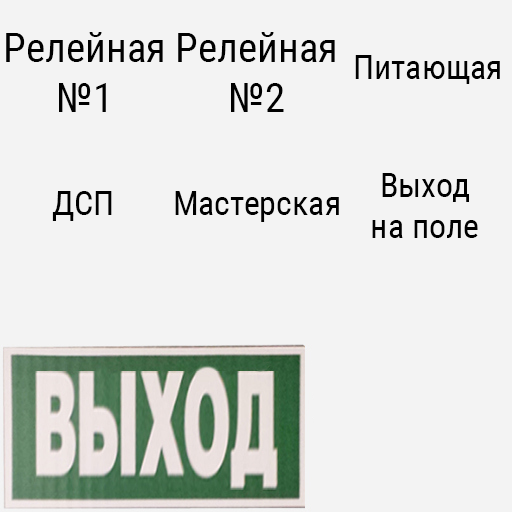
<style>
.page{position:relative;width:512px;height:512px;background:#f3f3f3}
.page>*{position:absolute;margin:0}
.t1{font:41px "RobotoCondensed-Regular";color:#000000}
.t2{font:34px "RobotoCondensed-Regular";color:#000000}
</style>
<div class="page">
<p class="t1" style="left:6px;top:32px;width:157px;height:80px;text-align:center">Релейная №1</p>
<p class="t1" style="left:178px;top:32px;width:157px;height:80px;text-align:center">Релейная №2</p>
<p class="t2" style="left:355px;top:55px;width:145px;height:29px">Питающая</p>
<p class="t2" style="left:372px;top:173px;width:106px;height:65px;text-align:center">Выход<br>на поле</p>
<p class="t2" style="left:52px;top:191px;width:60px;height:30px">ДСП</p>
<p class="t2" style="left:175px;top:191px;width:164px;height:31px">Мастерская</p>
</div>
